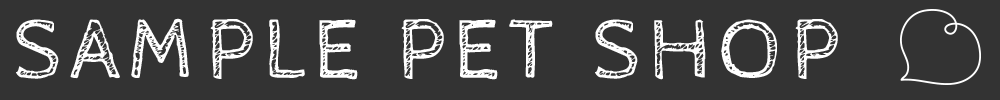
<style>
.page{position:relative;width:1000px;height:100px;background:#333333}
.page>*{position:absolute;margin:0}
.t1{font:87px "CabinSketch-Regular";letter-spacing:0.1em;color:#ffffff}
</style>
<div class="page">
<p class="t1" style="left:16px;top:18px;width:822px;height:62px">SAMPLE PET SHOP</p>
</div>
